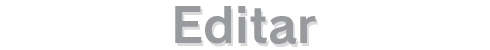
<style>
.page{position:relative;width:490px;height:50px;background:#ffffff}
.page>*{position:absolute;margin:0}
.t1{font:48px "RodinPro-B";color:#989a9d}
</style>
<div class="page">
<p class="t1" style="left:175px;top:6px;width:141px;height:38px">Editar</p>
</div>
